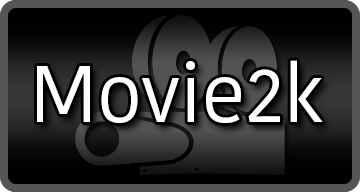
<style>
.page{position:relative;width:360px;height:192px}
.page>*{position:absolute;margin:0}
.t1{font:80px "KohinoorBangla-Regular";color:#fffefe}
</style>
<div class="page">
<p class="t1" style="left:37px;top:60px;width:286px;height:63px">Movie2k</p>
</div>
